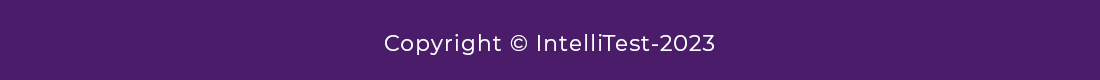
<style>
.page{position:relative;width:1100px;height:80px;background:#4a1c6a}
.page>*{position:absolute;margin:0}
.t1{font:22px "Montserrat-Regular";letter-spacing:0.05em;color:#ffffff}
</style>
<div class="page">
<p class="t1" style="left:385px;top:34px;width:329px;height:21px">Copyright © IntelliTest-2023</p>
</div>
